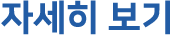
<style>
.page{position:relative;width:174px;height:35px;background:#ffffff}
.page>*{position:absolute;margin:0}
.t1{font:36px "NanumSquareEB";color:#225ca5}
</style>
<div class="page">
<p class="t1" style="left:1px;top:0px;width:169px;height:35px">자세히 보기</p>
</div>
